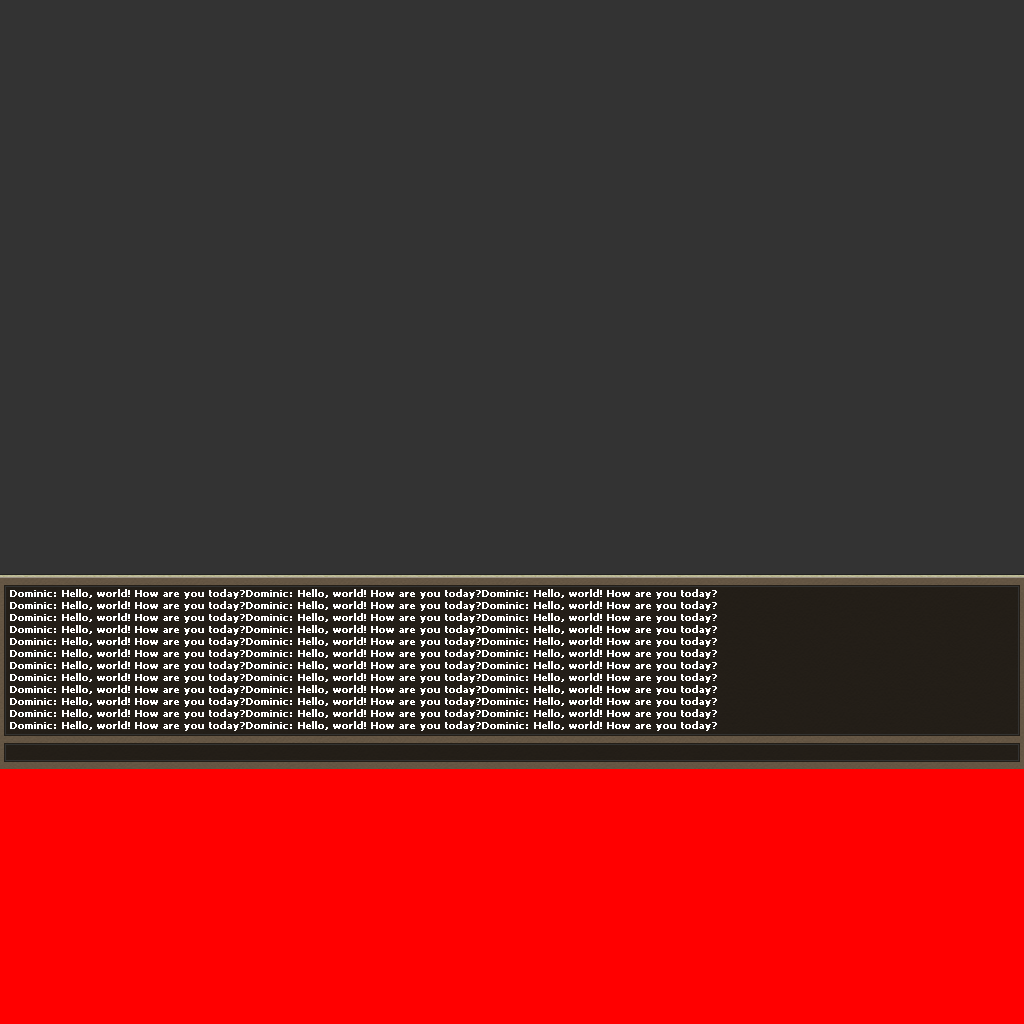
<style>
.page{position:relative;width:1024px;height:1024px;background:#333333}
.page>*{position:absolute;margin:0}
.t1{font:10px "Tahoma";color:#ffffff;font-weight:bold}
</style>
<div class="page">
<p class="t1" style="left:10px;top:589px;width:707px;height:142px">Dominic: Hello, world! How are you today?Dominic: Hello, world! How are you today?Dominic: Hello, world! How are you today?<br>Dominic: Hello, world! How are you today?Dominic: Hello, world! How are you today?Dominic: Hello, world! How are you today?<br>Dominic: Hello, world! How are you today?Dominic: Hello, world! How are you today?Dominic: Hello, world! How are you today?<br>Dominic: Hello, world! How are you today?Dominic: Hello, world! How are you today?Dominic: Hello, world! How are you today?<br>Dominic: Hello, world! How are you today?Dominic: Hello, world! How are you today?Dominic: Hello, world! How are you today?<br>Dominic: Hello, world! How are you today?Dominic: Hello, world! How are you today?Dominic: Hello, world! How are you today?<br>Dominic: Hello, world! How are you today?Dominic: Hello, world! How are you today?Dominic: Hello, world! How are you today?<br>Dominic: Hello, world! How are you today?Dominic: Hello, world! How are you today?Dominic: Hello, world! How are you today?<br>Dominic: Hello, world! How are you today?Dominic: Hello, world! How are you today?Dominic: Hello, world! How are you today?<br>Dominic: Hello, world! How are you today?Dominic: Hello, world! How are you today?Dominic: Hello, world! How are you today?<br>Dominic: Hello, world! How are you today?Dominic: Hello, world! How are you today?Dominic: Hello, world! How are you today?<br>Dominic: Hello, world! How are you today?Dominic: Hello, world! How are you today?Dominic: Hello, world! How are you today?</p>
</div>
